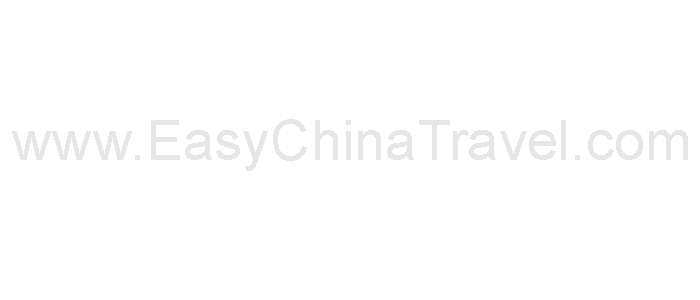
<style>
.page{position:relative;width:700px;height:300px;background:#ffffff}
.page>*{position:absolute;margin:0}
.t1{font:56px "ArialMT";color:#e6e6e6}
</style>
<div class="page">
<p class="t1" style="left:12px;top:119px;width:676px;height:52px">www.EasyChinaTravel.com</p>
</div>
